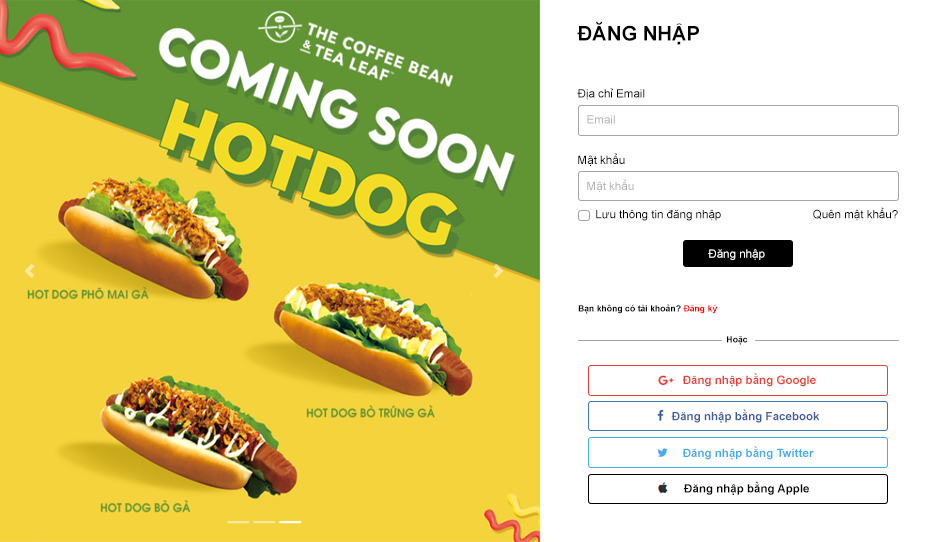
<style>
.page{position:relative;width:936px;height:542px;background:#ffffff}
.page>*{position:absolute;margin:0}
.t1{font:20.2px "Arial-BoldMT";color:#010101}
.t2{font:11.6px "ArialMT";color:#000000}
.t3{font:11.6px "ArialMT";color:#b3b3b3}
.t4{font:11.6px "ArialMT";color:#ffffff}
.t5{font:8.7px "Arial-BoldMT";color:#000000}
.t6{font:8.7px "Arial-BoldMT";color:#ff0000}
.t7{font:8.7px "Arial-BoldMT";color:#010101}
.t8{font:11.6px "Arial-BoldMT";color:#ea4335}
.t9{font:11.6px "Arial-BoldMT";color:#405d9d}
.t10{font:11.6px "Arial-BoldMT";color:#42aeec}
.t11{font:11.6px "Arial-BoldMT";color:#000000}
</style>
<div class="page">
<p class="t1" style="left:577px;top:21px;width:122px;height:24px">ĐĂNG NHẬP</p>
<p class="t2" style="left:577px;top:88px;width:68px;height:12px">Địa chỉ Email</p>
<p class="t3" style="left:587px;top:115px;width:28px;height:9px">Email</p>
<p class="t2" style="left:578px;top:153px;width:47px;height:13px">Mật khẩu</p>
<p class="t3" style="left:587px;top:179px;width:47px;height:13px">Mật khẩu</p>
<p class="t2" style="left:596px;top:209px;width:125px;height:12px">Lưu thông tin đăng nhập</p>
<p class="t2" style="left:813px;top:207px;width:85px;height:14px">Quên mật khẩu?</p>
<p class="t4" style="left:708px;top:249px;width:57px;height:11px">Đăng nhập</p>
<p class="t5" style="left:578px;top:304px;width:140px;height:10px">Bạn không có tài khoản? <span class="t6">Đăng ký</span></p>
<p class="t7" style="left:727px;top:336px;width:21px;height:9px">Hoặc</p>
<p class="t8" style="left:682px;top:373px;width:134px;height:14px">Đăng nhập bằng Google</p>
<p class="t9" style="left:671px;top:409px;width:149px;height:14px">Đăng nhập bằng Facebook</p>
<p class="t10" style="left:682px;top:446px;width:132px;height:14px">Đăng nhập bằng Twitter</p>
<p class="t11" style="left:684px;top:481px;width:125px;height:14px">Đăng nhập bằng Apple</p>
</div>
